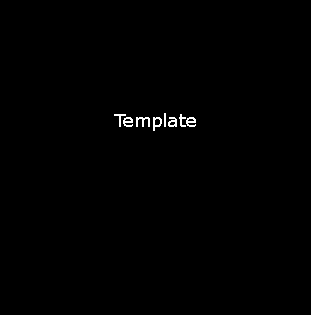
<style>
.page{position:relative;width:311px;height:315px;background:#000000}
.page>*{position:absolute;margin:0}
.t1{font:18px "Verdana";color:#ffffff}
</style>
<div class="page">
<p class="t1" style="left:114px;top:113px;width:82px;height:18px">Template</p>
</div>
